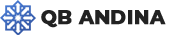
<style>
.page{position:relative;width:177px;height:36px;background:#ffffff}
.page>*{position:absolute;margin:0}
.t1{font:19.3px "Montserrat-ExtraBold";color:#222222;font-weight:bold}
</style>
<div class="page">
<p class="t1" style="left:41px;top:10px;width:125px;height:18px">QB ANDINA</p>
</div>
